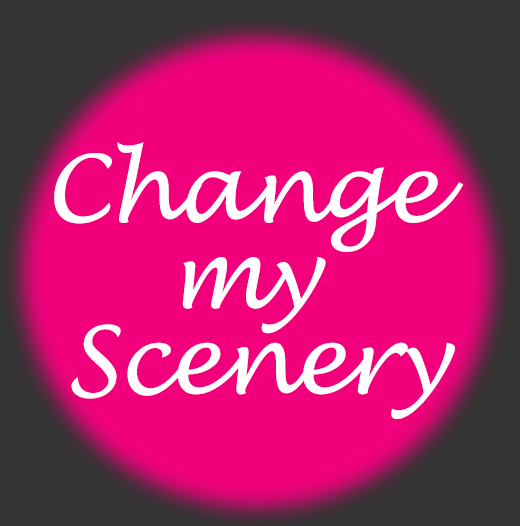
<style>
.page{position:relative;width:520px;height:526px;background:#f2007c}
.page>*{position:absolute;margin:0}
.t1{font:92.7px/85.7px "LucidaHandwriting-Italic";letter-spacing:-0.02em;color:#ffffff}
</style>
<div class="page">
<p class="t1" style="left:54px;top:142px;width:410px;height:277px;text-align:center">Change <br>my <br>Scenery</p>
</div>
